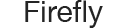
<style>
.page{position:relative;width:120px;height:28px;background:#ffffff}
.page>*{position:absolute;margin:0}
.t1{font:30px "HelveticaNeue";color:#242424}
</style>
<div class="page">
<p class="t1" style="left:25px;top:0px;width:78px;height:28px">Firefly</p>
</div>
